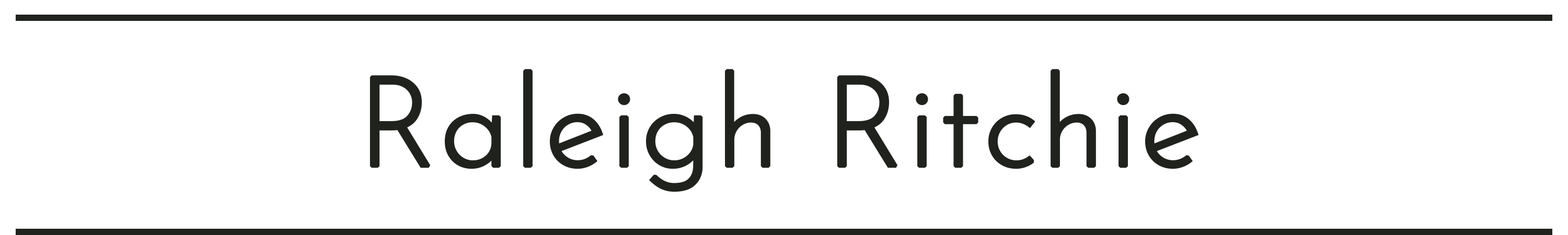
<style>
.page{position:relative;width:1568px;height:235px;background:#ffffff}
.page>*{position:absolute;margin:0}
.t1{font:125.4px "JosefinSans-Light";color:#20221e;font-weight:bold}
</style>
<div class="page">
<p class="t1" style="left:370px;top:69px;width:829px;height:123px">Raleigh Ritchie</p>
</div>
